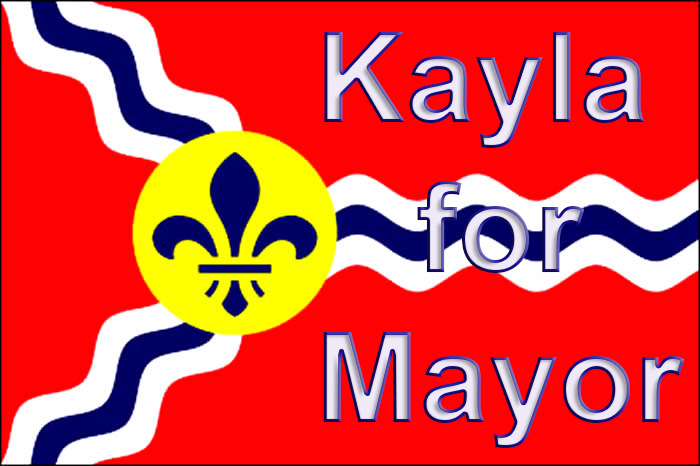
<style>
.page{position:relative;width:700px;height:466px;background:#ff0103}
.page>*{position:absolute;margin:0}
.t1{font:125px "Arial-BoldMT"}
</style>
<div class="page">
<p class="t1" style="left:323px;top:32px;width:362px;height:416px;text-align:center">Kayla <br>for<br>Mayor</p>
</div>
